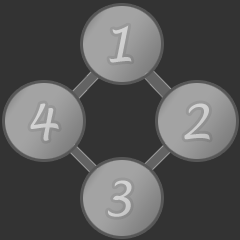
<style>
.page{position:relative;width:240px;height:240px;background:#333333}
.page>*{position:absolute;margin:0}
.t1{font:48px "LucidaHandwriting-Italic";color:#cecece}
.t2{font:48px "LucidaHandwriting-Italic";color:#cdcdcd}
</style>
<div class="page">
<p class="t1" style="left:109px;top:25px;width:23px;height:38px">1</p>
<p class="t1" style="left:30px;top:103px;width:29px;height:38px">4</p>
<p class="t2" style="left:184px;top:103px;width:26px;height:37px">2</p>
<p class="t1" style="left:108px;top:180px;width:24px;height:37px">3</p>
</div>
